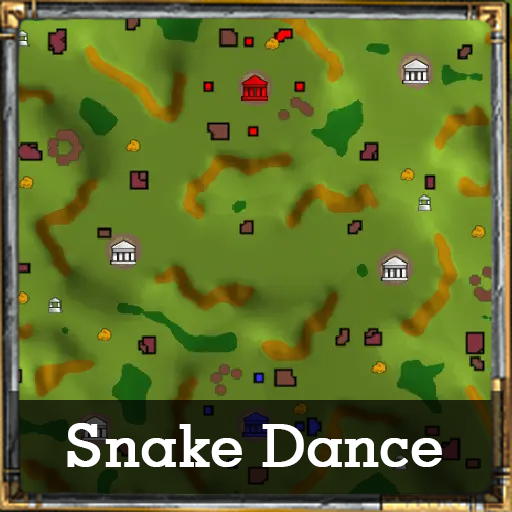
<style>
.page{position:relative;width:512px;height:512px}
.page>*{position:absolute;margin:0}
.t1{font:58.4px "GeometricSlab703BT-Medium";color:#ffffff;font-weight:bold}
</style>
<div class="page">
<p class="t1" style="left:67px;top:423px;width:375px;height:44px">Snake Dance</p>
</div>
